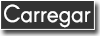
<style>
.page{position:relative;width:100px;height:36px;background:#333333}
.page>*{position:absolute;margin:0}
.t1{font:24px "Arcon-Regular";color:#ffffff;scale:0.92 1}
</style>
<div class="page">
<p class="t1" style="left:4px;top:4px;width:87px;height:24px">Carregar</p>
</div>
